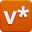
<style>
.page{position:relative;width:32px;height:32px}
.page>*{position:absolute;margin:0}
.t1{font:23.4px "OpenSans-Bold";color:#f6f7f2}
</style>
<div class="page">
<p class="t1" style="left:3px;top:6px;width:26px;height:18px">v*</p>
</div>
